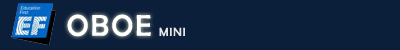
<style>
.page{position:relative;width:400px;height:50px;background:#0c1f3a}
.page>*{position:absolute;margin:0}
.t1{font:30px "BerlinSansFB-Reg";letter-spacing:0.075em;color:#ffffff}
.t2{font:12px "BerlinSansFB-Reg";letter-spacing:0.075em;color:#e6e6e6}
</style>
<div class="page">
<p class="t1" style="left:67px;top:14px;width:84px;height:23px">OBOE</p>
<p class="t2" style="left:159px;top:27px;width:26px;height:10px">MINI</p>
</div>
